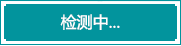
<style>
.page{position:relative;width:181px;height:46px;background:#02949d}
.page>*{position:absolute;margin:0}
.t1{font:16px "MicrosoftYaHeiUI";color:#ffffff}
</style>
<div class="page">
<p class="t1" style="left:60px;top:14px;width:60px;height:16px">检测中...</p>
</div>
